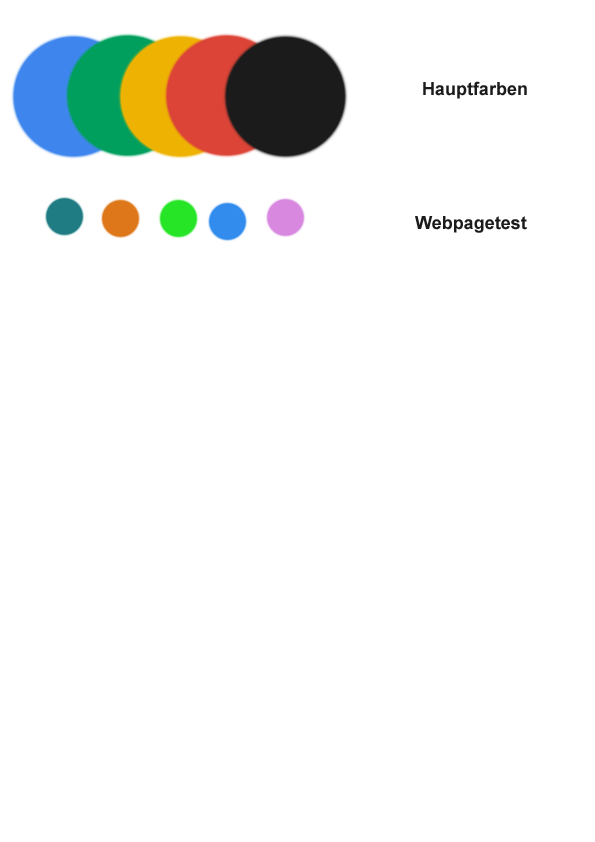
<style>
.page{position:relative;width:595px;height:842px;background:#ffffff}
.page>*{position:absolute;margin:0}
.t1{font:18px "Arial-BoldMT";color:#1b1b1b}
</style>
<div class="page">
<p class="t1" style="left:423px;top:81px;width:104px;height:18px">Hauptfarben</p>
<p class="t1" style="left:415px;top:216px;width:112px;height:17px">Webpagetest</p>
</div>
